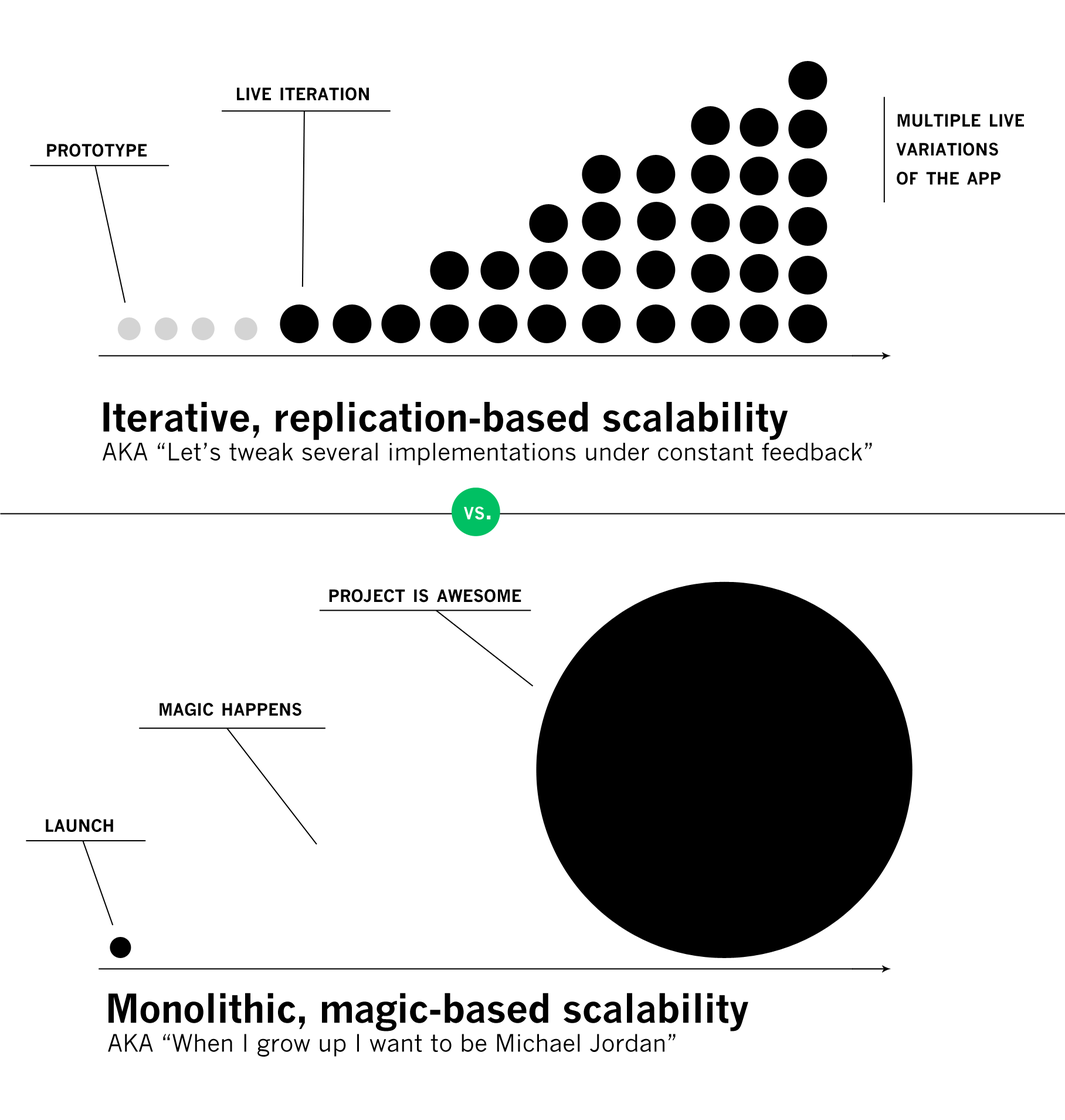
<style>
.page{position:relative;width:1065px;height:1120px;background:#ffffff}
.page>*{position:absolute;margin:0}
.t1{font:23.7px "NewsGothicMT-Bold";color:#000000;font-variant:small-caps}
.t2{font:23.7px/28.9px "NewsGothicMT-Bold";color:#000000;font-variant:small-caps}
.t3{font:23.7px/28.9px "NewsGothicMT";color:#000000}
.t4{font:39px/28.9px "NewsGothicMT-Bold";letter-spacing:-0.02em;color:#000000}
.t5{font:23.7px "NewsGothicMT-Bold";color:#ffffff;font-variant:small-caps}
</style>
<div class="page">
<p class="t1" style="left:237px;top:87px;width:132px;height:13px">live iteration</p>
<p class="t2" style="left:896px;top:114px;width:128px;height:71px">multiple live<br>variations<br>of the app</p>
<p class="t1" style="left:47px;top:144px;width:100px;height:13px">prototype</p>
<p class="t3" style="left:103px;top:402px;width:769px;height:63px"><span class="t4">Iterative, replication-based scalability<br></span>AKA “Let’s tweak several implementations under constant feedback”</p>
<p class="t5" style="left:464px;top:506px;width:27px;height:14px">vs.</p>
<p class="t1" style="left:329px;top:589px;width:192px;height:13px">project is awesome</p>
<p class="t1" style="left:160px;top:703px;width:141px;height:13px">magic happens</p>
<p class="t1" style="left:46px;top:819px;width:67px;height:13px">launch</p>
<p class="t3" style="left:108px;top:992px;width:640px;height:64px"><span class="t4">Monolithic, magic-based scalability<br></span>AKA “When I grow up I want to be Michael Jordan”</p>
</div>
